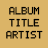
<style>
.page{position:relative;width:48px;height:48px;background:#dbb467}
.page>*{position:absolute;margin:0}
.t1{font:10px "LCDSolid";color:#000000}
</style>
<div class="page">
<p class="t1" style="left:6px;top:6px;width:37px;height:33px;text-align:center">ALBUM<br>TITLE<br>ARTIST</p>
</div>
